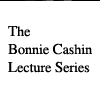
<style>
.page{position:relative;width:100px;height:100px;background:#ffffff}
.page>*{position:absolute;margin:0}
.t1{font:14px "Times-Roman"}
.t2{font:15px "Times-Roman"}
</style>
<div class="page">
<p class="t1" style="left:8px;top:25px;width:84px;height:47px"><span class="t2">T</span>he<br><span class="t2">B</span>onnie <span class="t2">C</span>ashin<br><span class="t2">L</span>ecture <span class="t2">S</span>eries</p>
</div>
